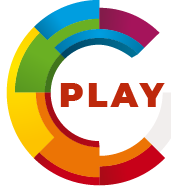
<style>
.page{position:relative;width:171px;height:188px;background:#ffffff}
.page>*{position:absolute;margin:0}
.t1{font:33.3px "Montserrat-Black";letter-spacing:0.1em;color:#be290c}
</style>
<div class="page">
<p class="t1" style="left:60px;top:83px;width:105px;height:24px">PLAY</p>
</div>
